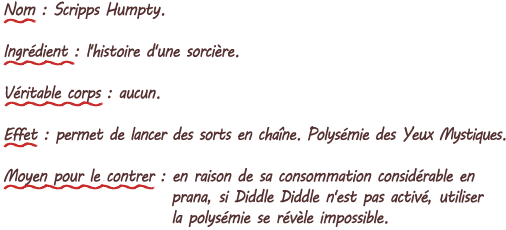
<style>
.page{position:relative;width:506px;height:230px;background:#ffffff}
.page>*{position:absolute;margin:0}
.t1{font:17.3px "MVBoli";letter-spacing:-0.05em;color:#553030;scale:0.9 1}
.t2{font:17.3px "MVBoli";letter-spacing:-0.06em;color:#553030;scale:0.9 1}
.t3{font:17.3px "MVBoli";letter-spacing:-0.075em;color:#553030;scale:0.9 1}
</style>
<div class="page">
<p class="t1" style="left:4px;top:1px;width:502px;height:226px">Nom : Scripps Humpty.<br><br>Ingrédient : l'histoire d'une sorcière.<br><br>Véritable corps : aucun.<br><br>Effet : <span class="t2">permet de lancer des sorts en chaîne. Polysémie des Yeux </span><span class="t3">Mystiques.<br></span><br>Moyen pour le contrer : en raison de sa consommation considérable en<br>                         prana, si Diddle Diddle n'est pas activé, utiliser<br>                         la polysémie se révèle impossible.</p>
</div>
